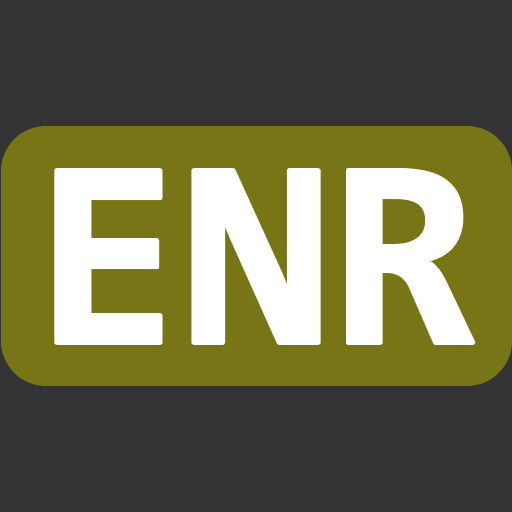
<style>
.page{position:relative;width:512px;height:512px;background:#333333}
.page>*{position:absolute;margin:0}
.t1{font:271px "Consolas-Bold";color:#ffffff}
</style>
<div class="page">
<p class="t1" style="left:56px;top:170px;width:418px;height:173px">ENR</p>
</div>
